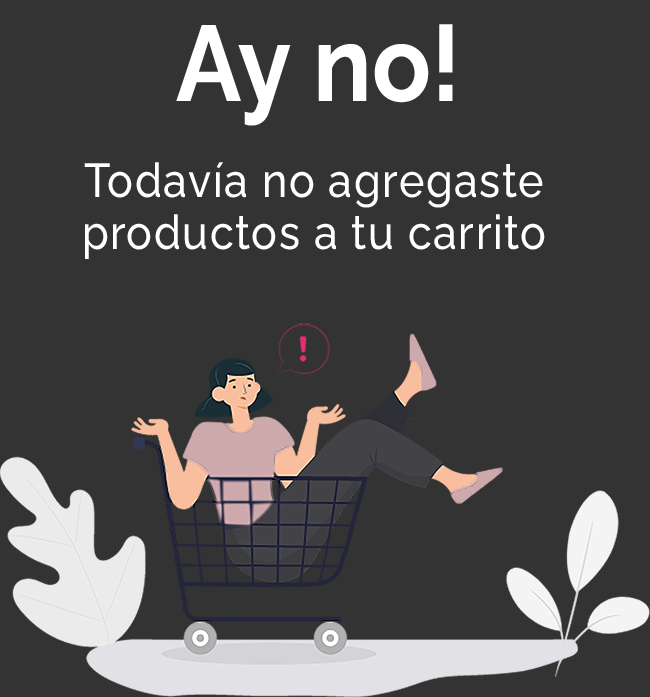
<style>
.page{position:relative;width:650px;height:697px;background:#333333}
.page>*{position:absolute;margin:0}
.t1{font:106.7px "RalewayRoman-Bold";letter-spacing:0.003em;color:#ffffff;scale:0.91 1}
.t2{font:47.4px "RalewayRoman-Medium";letter-spacing:0.034em;color:#ffffff;scale:0.91 1}
</style>
<div class="page">
<p class="t1" style="left:176px;top:24px;width:277px;height:102px">Ay no!</p>
<p class="t2" style="left:84px;top:162px;width:461px;height:97px;text-align:center">Todavía no agregaste<br>productos a tu carrito</p>
</div>
